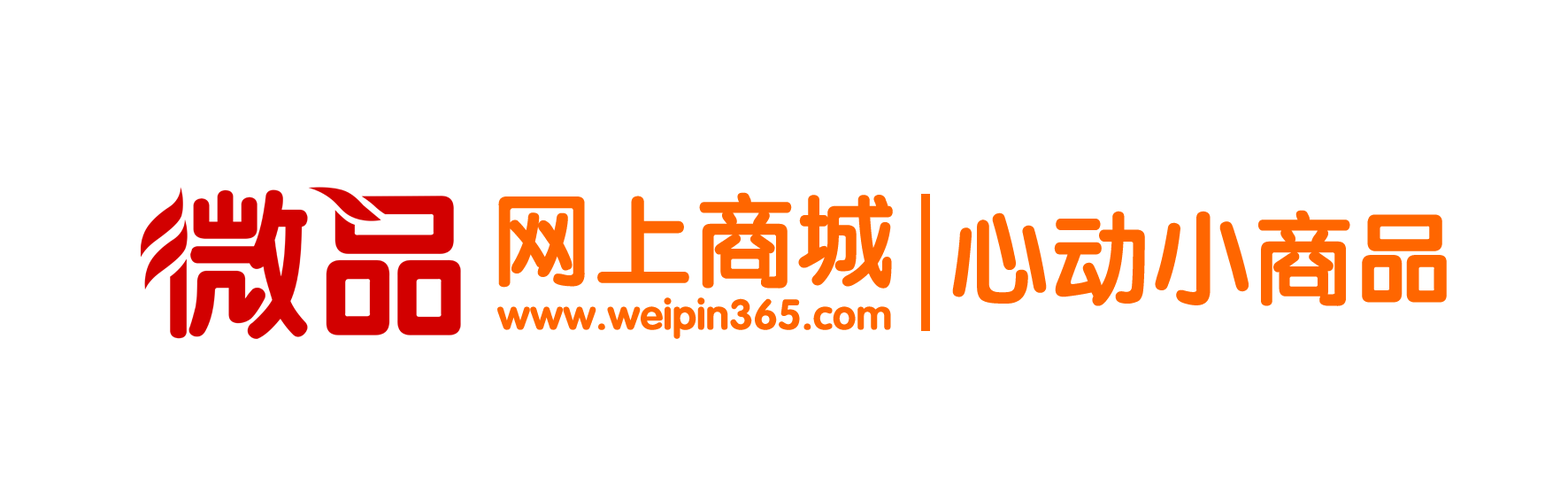
<style>
.page{position:relative;width:1568px;height:493px;background:#ffffff}
.page>*{position:absolute;margin:0}
.t1{font:101.4px "FZY4JW--GB1-0";color:#ff6600}
.t2{font:42.4px "FZY4JW--GB1-0";color:#ff6600}
</style>
<div class="page">
<p class="t1" style="left:498px;top:192px;width:395px;height:96px">网上商城</p>
<p class="t1" style="left:952px;top:210px;width:495px;height:96px">心动小商品</p>
<p class="t2" style="left:497px;top:297px;width:394px;height:42px">www.weipin365.com</p>
</div>
